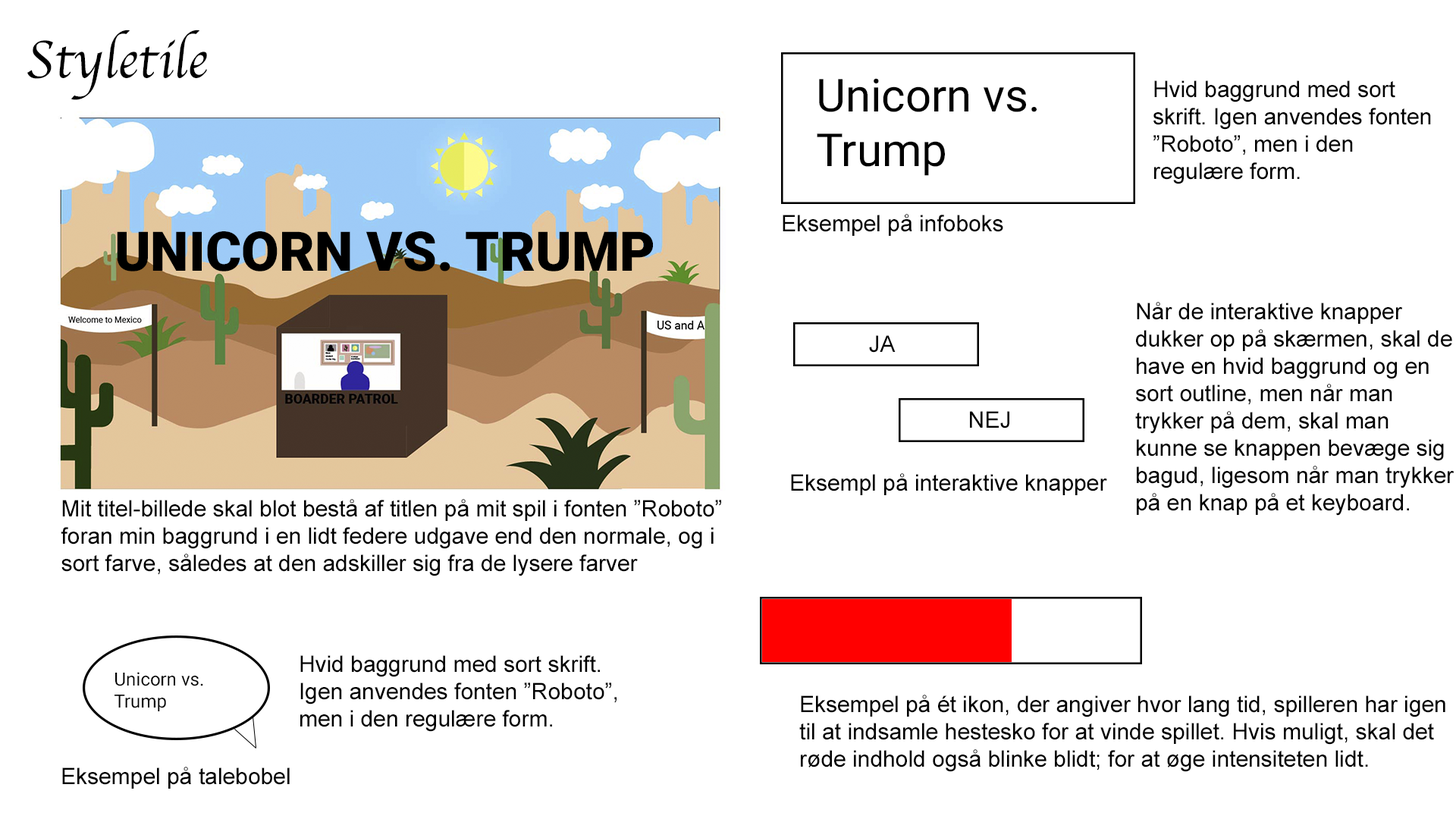
<style>
.page{position:relative;width:1456px;height:819px;background:#ffffff}
.page>*{position:absolute;margin:0}
.t1{font:54.6px "Apple-Chancery";color:#000000}
.t2{font:45.5px "Roboto-Regular";color:#000000}
.t3{font:22.7px "ArialMT";color:#000000}
.t4{font:54.6px "Roboto-Black";color:#000000}
.t5{font:18.2px "Roboto-Regular";color:#000000}
</style>
<div class="page">
<p class="t1" style="left:27px;top:30px;width:180px;height:70px">Styletile</p>
<p class="t2" style="left:817px;top:78px;width:220px;height:98px">Unicorn vs. Trump</p>
<p class="t3" style="left:1153px;top:80px;width:278px;height:104px">Hvid baggrund med sort skrift. Igen anvendes fonten ”Roboto”, men i den regulære form.</p>
<p class="t3" style="left:783px;top:214px;width:220px;height:22px">Eksempel på infoboks</p>
<p class="t4" style="left:117px;top:231px;width:536px;height:40px">UNICORN VS. TRUMP</p>
<p class="t3" style="left:1135px;top:302px;width:319px;height:214px">Når de interaktive knapper dukker op på skærmen, skal de have en hvid baggrund og en sort outline, men når man trykker på dem, skal man kunne se knappen bevæge sig bagud, ligesom når man trykker på en knap på et keyboard.</p>
<p class="t3" style="left:869px;top:335px;width:27px;height:18px">JA</p>
<p class="t3" style="left:970px;top:411px;width:39px;height:17px">NEJ</p>
<p class="t3" style="left:791px;top:473px;width:316px;height:22px">Eksempl på interaktive knapper</p>
<p class="t3" style="left:61px;top:499px;width:660px;height:77px">Mit titel-billede skal blot bestå af titlen på mit spil i fonten ”Roboto” foran min baggrund i en lidt federe udgave end den normale, og i sort farve, således at den adskiller sig fra de lysere farver</p>
<p class="t3" style="left:300px;top:655px;width:317px;height:77px">Hvid baggrund med sort skrift. Igen anvendes fonten ”Roboto”, men i den regulære form.</p>
<p class="t5" style="left:115px;top:672px;width:88px;height:39px">Unicorn vs. Trump</p>
<p class="t3" style="left:799px;top:695px;width:646px;height:77px">Eksempel på ét ikon, der angiver hvor lang tid, spilleren har igen til at indsamle hestesko for at vinde spillet. Hvis muligt, skal det røde indhold også blinke blidt; for at øge intensiteten lidt.</p>
<p class="t3" style="left:62px;top:767px;width:228px;height:22px">Eksempel på talebobel</p>
</div>
